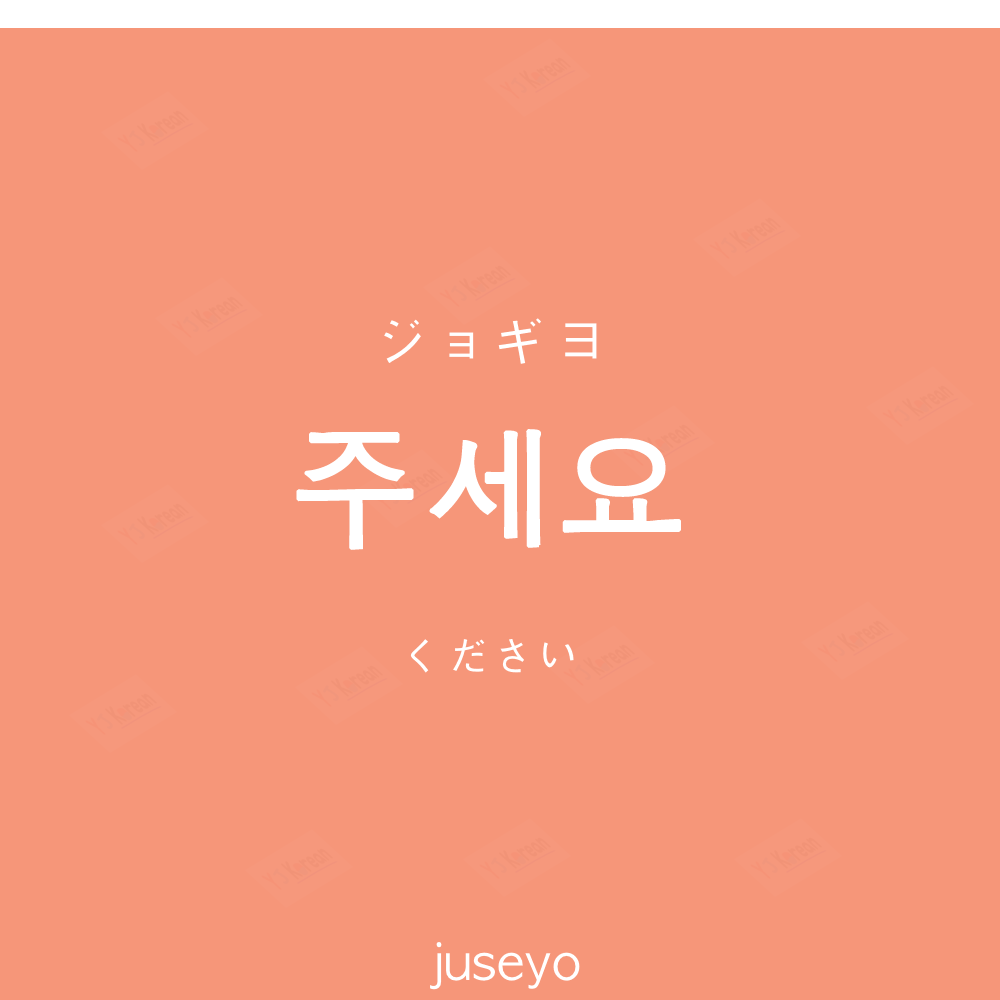
<style>
.page{position:relative;width:1000px;height:1000px;background:#f69679}
.page>*{position:absolute;margin:0}
.t1{font:60px "AppleGothic";color:#ffffff}
.t2{font:130px "AppleGothic";color:#ffffff;font-weight:bold}
.t3{font:45px "AppleGothic";color:#ffffff}
.t4{font:50px "AppleGothic";color:#ffffff}
</style>
<div class="page">
<p class="t1" style="left:384px;top:318px;width:213px;height:46px">ジョギヨ</p>
<p class="t2" style="left:296px;top:429px;width:385px;height:121px">주세요</p>
<p class="t3" style="left:410px;top:639px;width:164px;height:34px">ください</p>
<p class="t4" style="left:430px;top:942px;width:150px;height:48px">juseyo</p>
</div>
